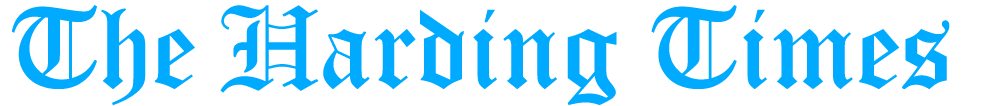
<style>
.page{position:relative;width:996px;height:106px;background:#ffffff}
.page>*{position:absolute;margin:0}
.t1{font:115px "OldEnglishTextMT";color:#00aaff}
.t2{font:120px "holyunion";color:#00aaff}
</style>
<div class="page">
<p class="t1" style="left:11px;top:5px;width:939px;height:101px">The <span class="t2">H</span>arding Times</p>
</div>
